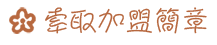
<style>
.page{position:relative;width:217px;height:45px;background:#ffffff}
.page>*{position:absolute;margin:0}
.t1{font:27.9px "DFLianLian-W4-HK-BF";color:#b7683f}
</style>
<div class="page">
<p class="t1" style="left:45px;top:7px;width:162px;height:27px">索取加盟簡章</p>
</div>
